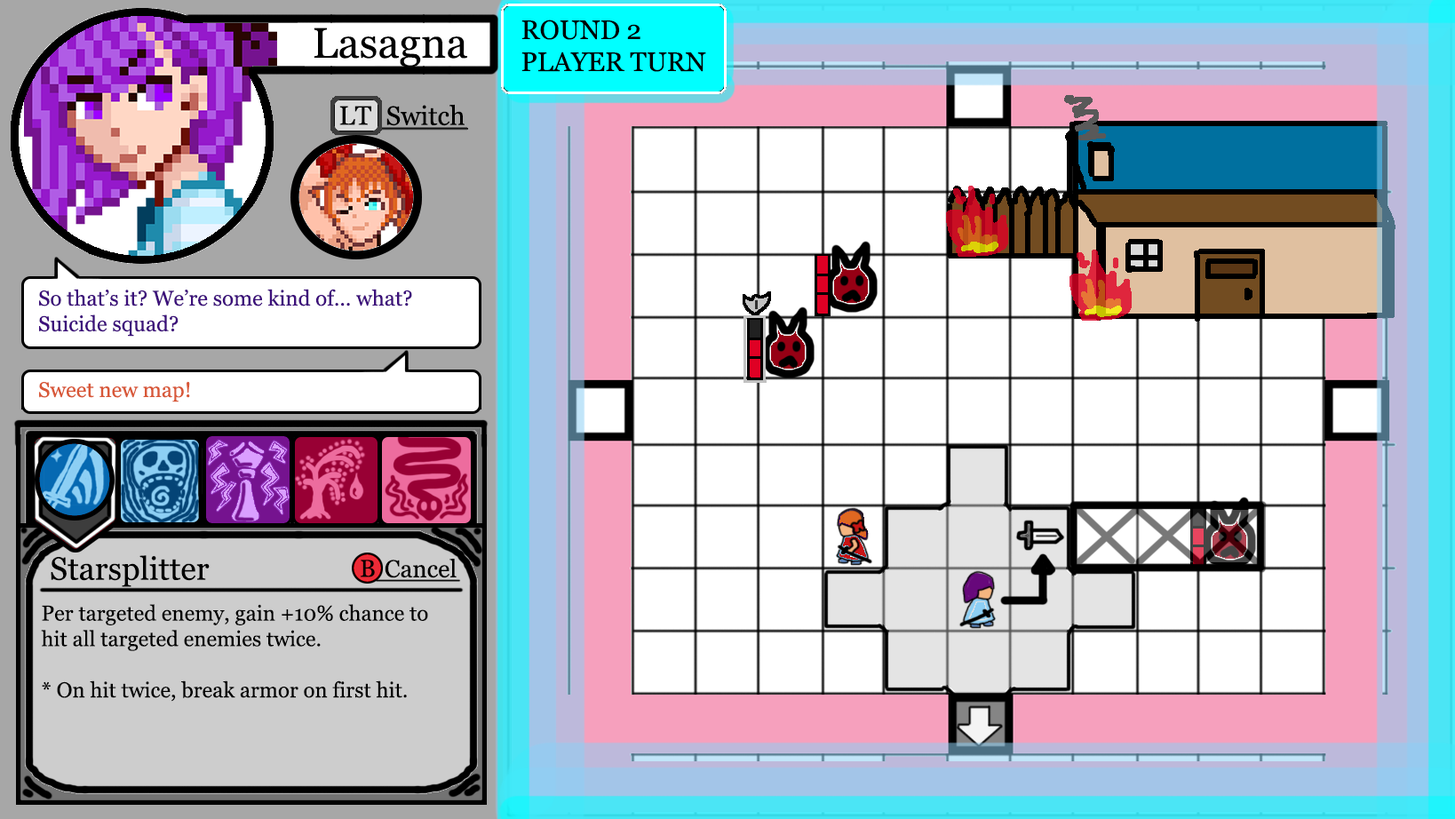
<style>
.page{position:relative;width:1455px;height:819px;background:#ffffff}
.page>*{position:absolute;margin:0}
.t1{font:42.7px "Georgia";color:#000000}
.t2{font:26.7px "Georgia";color:#000000}
.t3{font:21.3px "Georgia";color:#3d107b}
.t4{font:21.3px "Georgia";color:#d85838}
.t5{font:32px "Georgia";color:#000000}
.t6{font:24.3px "Georgia";color:#000000}
.t7{font:21.3px "Georgia";color:#000000}
</style>
<div class="page">
<p class="t1" style="left:314px;top:28px;width:153px;height:40px">Lasagna</p>
<p class="t2" style="left:522px;top:20px;width:184px;height:52px">ROUND 2<br>PLAYER TURN</p>
<p class="t2" style="left:339px;top:106px;width:32px;height:19px">LT</p>
<p class="t2" style="left:387px;top:104px;width:78px;height:22px">Switch</p>
<p class="t3" style="left:39px;top:289px;width:373px;height:48px">So that’s it? We’re some kind of... what? <br>Suicide squad?</p>
<p class="t4" style="left:39px;top:381px;width:151px;height:22px">Sweet new map!</p>
<p class="t5" style="left:51px;top:555px;width:159px;height:32px">Starsplitter</p>
<p class="t6" style="left:361px;top:560px;width:14px;height:18px">B</p>
<p class="t6" style="left:385px;top:559px;width:72px;height:19px">Cancel</p>
<p class="t7" style="left:41px;top:604px;width:387px;height:98px">Per targeted enemy, gain +10% chance to <br>hit all targeted enemies twice.<br><br>* On hit twice, break armor on first hit.</p>
</div>
